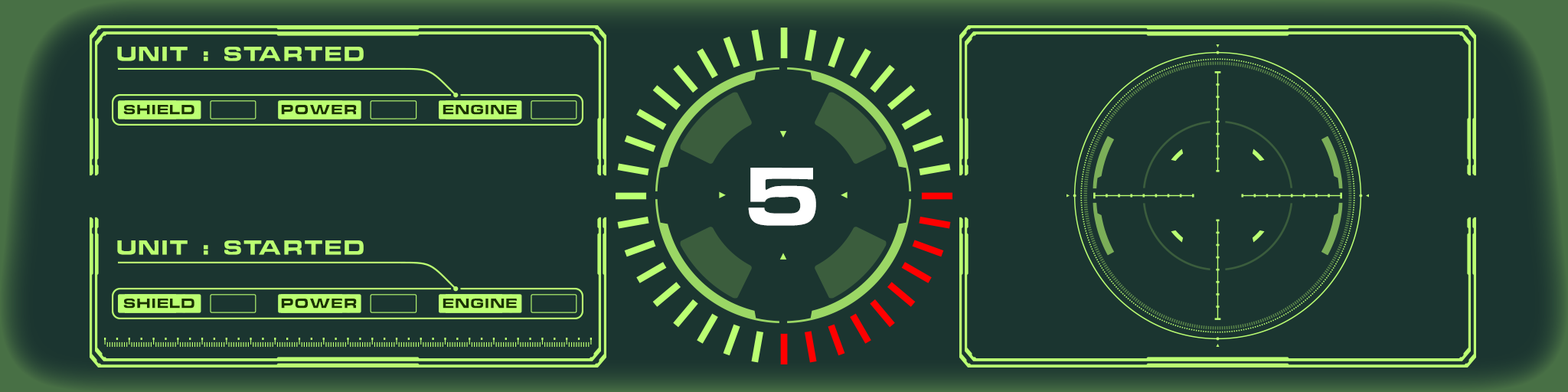
<style>
.page{position:relative;width:1568px;height:392px;background:#1b3530}
.page>*{position:absolute;margin:0}
.t1{font:18.7px "ChinoCapsSSK";letter-spacing:0.12em;color:#bbff72}
.t2{font:12.4px "ChinoCapsSSK";letter-spacing:0.12em;color:#1a3200}
.t3{font:75.8px "ChinoCapsSSK";letter-spacing:0.12em;color:#ffffff}
</style>
<div class="page">
<p class="t1" style="left:117px;top:47px;width:247px;height:14px">UNIT : STARTED</p>
<p class="t2" style="left:123px;top:105px;width:71px;height:10px">SHIELD</p>
<p class="t2" style="left:281px;top:105px;width:76px;height:10px">POWER</p>
<p class="t2" style="left:443px;top:105px;width:74px;height:10px">ENGINE</p>
<p class="t3" style="left:748px;top:168px;width:68px;height:58px">5</p>
<p class="t1" style="left:117px;top:240px;width:247px;height:15px">UNIT : STARTED</p>
<p class="t2" style="left:123px;top:299px;width:71px;height:10px">SHIELD</p>
<p class="t2" style="left:281px;top:299px;width:76px;height:10px">POWER</p>
<p class="t2" style="left:443px;top:299px;width:74px;height:10px">ENGINE</p>
</div>
